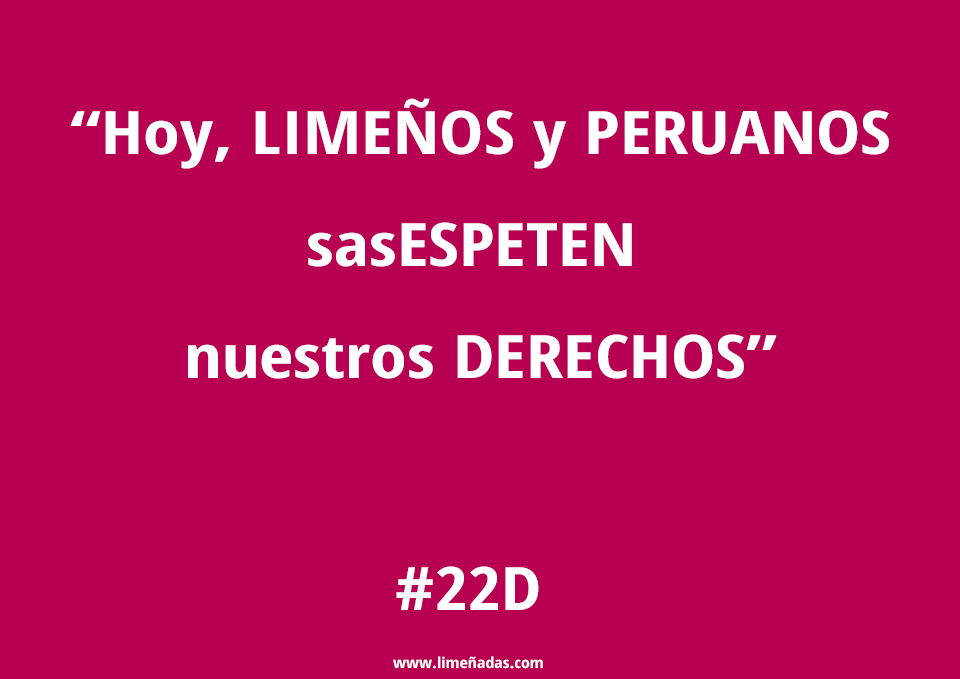
<style>
.page{position:relative;width:960px;height:679px;background:#b70052}
.page>*{position:absolute;margin:0}
.t1{font:60px/112.2px "OpenSans-CondensedBold";color:#ffffff;scale:1.24 1}
.t2{font:15px/57.8px "OpenSans-CondensedBold";color:#ffffff;scale:1.2 1}
.t3{font:60px/57.8px "OpenSans-CondensedBold";color:#ffffff;scale:1.2 1}
</style>
<div class="page">
<p class="t1" style="left:70px;top:98px;width:819px;height:281px;text-align:center">“Hoy, LIMEÑOS y PERUANOS<br>sasESPETEN <br>nuestros DERECHOS”</p>
<p class="t2" style="left:393px;top:566px;width:150px;height:103px;text-align:center"><span class="t3">#22D<br></span>www.limeñadas.com</p>
</div>
